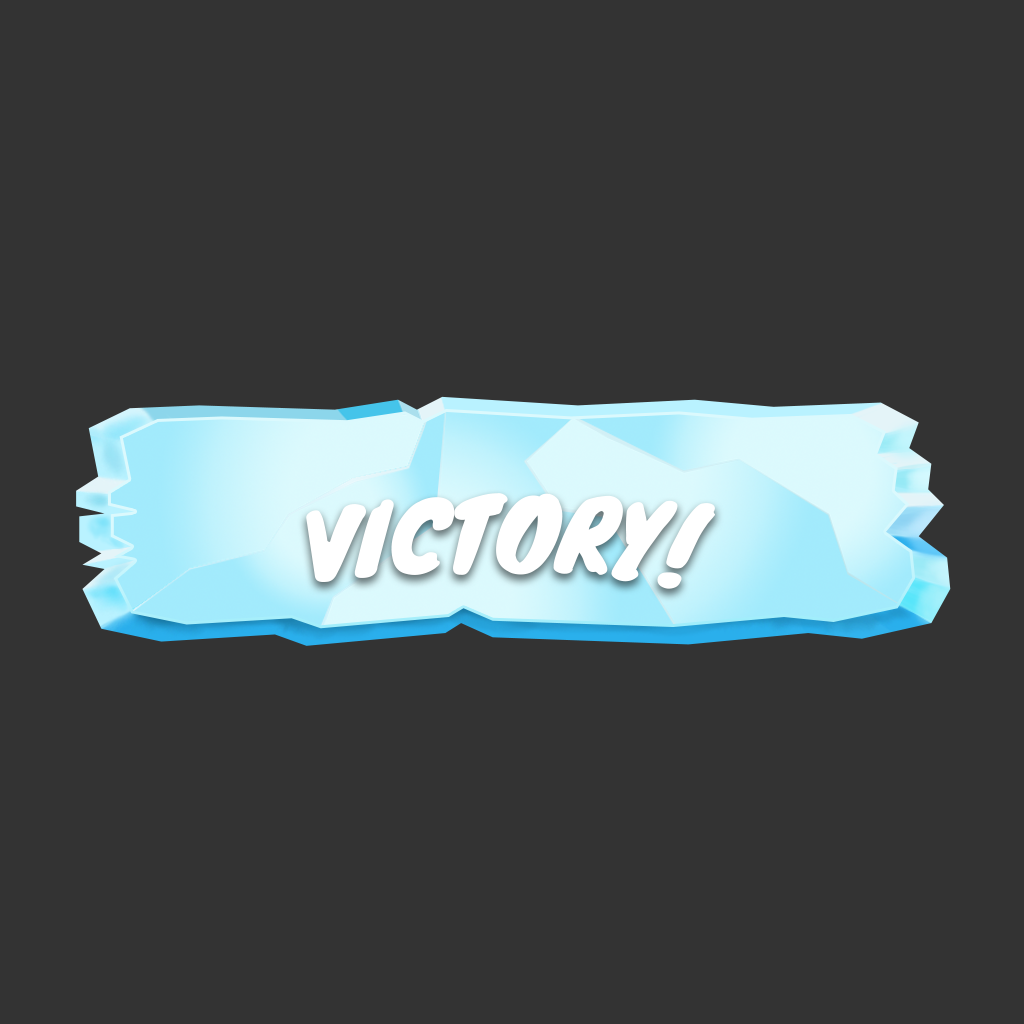
<style>
.page{position:relative;width:1024px;height:1024px;background:#333333}
.page>*{position:absolute;margin:0}
.t1{font:93.2px "Knewave-Regular";color:#ffffff}
</style>
<div class="page">
<p class="t1" style="left:306px;top:493px;width:409px;height:96px">VICTORY!</p>
</div>
